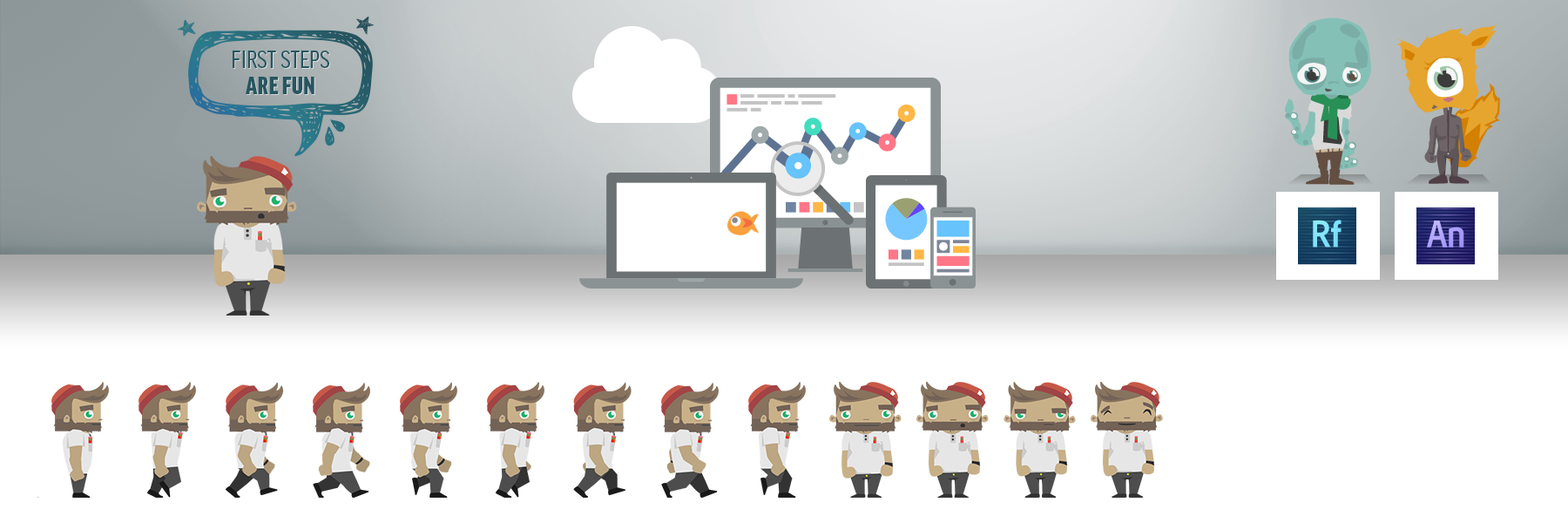
<style>
.page{position:relative;width:1568px;height:523px;background:#ffffff}
.page>*{position:absolute;margin:0}
.t1{font:26.1px/26.1px "GoodHeadlinePro-CondBook";color:#265661}
.t2{font:26.1px/26.1px "GoodHeadlinePro-CondBlack";color:#265661}
.t3{font:26.1px/26.1px "GoodHeadlinePro-CondBook"}
.t4{font:26.1px/26.1px "GoodHeadlinePro-CondBlack"}
</style>
<div class="page">
<p class="t1" style="left:233px;top:51px;width:96px;height:43px;text-align:center">FIRST STEPS<br><span class="t2">ARE FUN</span></p>
<p class="t3" style="left:233px;top:51px;width:97px;height:44px;text-align:center">FIRST STEPS<br><span class="t4">ARE FUN</span></p>
</div>
